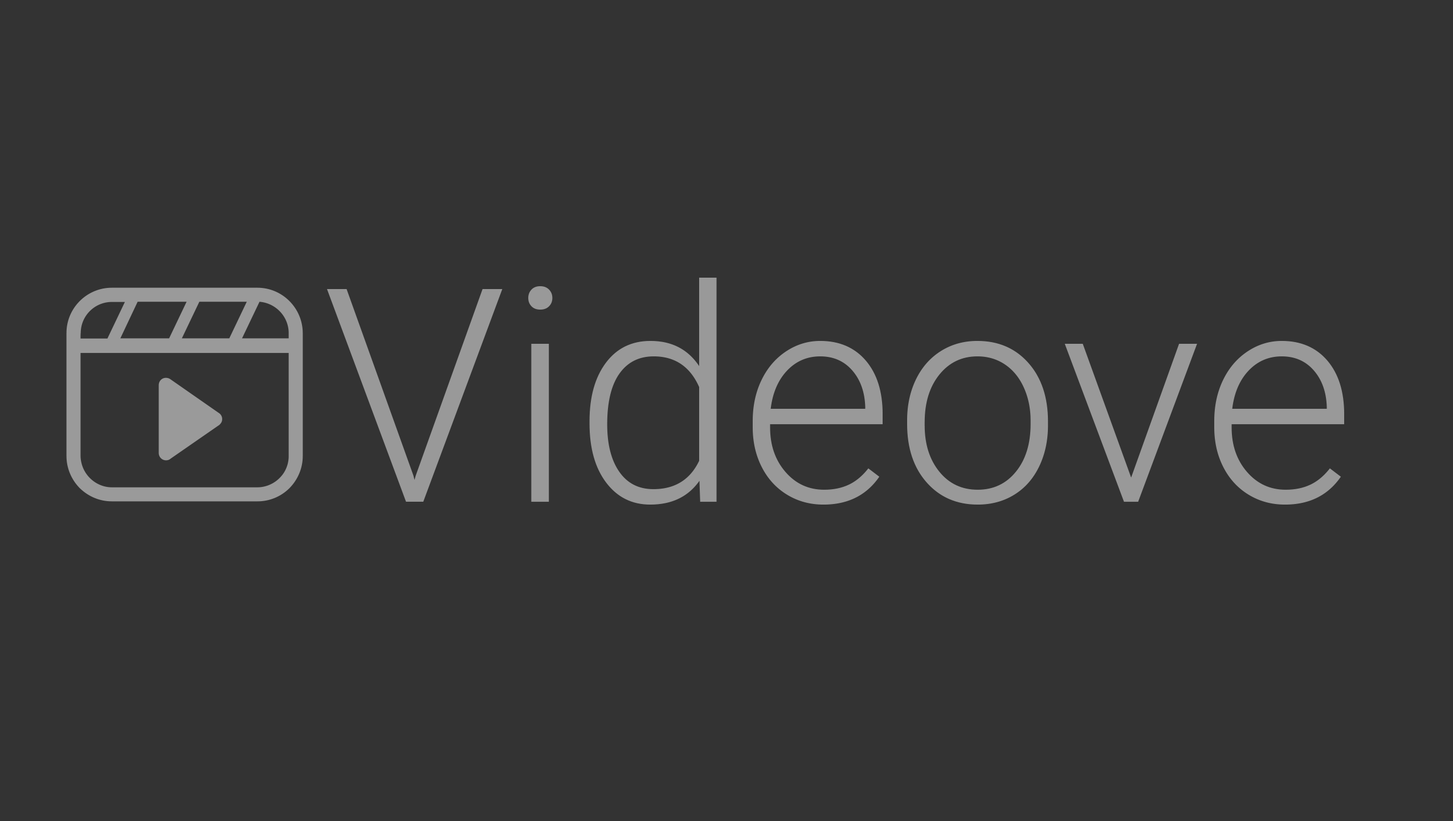
<style>
.page{position:relative;width:1453px;height:821px;background:#333333}
.page>*{position:absolute;margin:0}
.t1{font:298.8px "Roboto-Light";color:#999999}
</style>
<div class="page">
<p class="t1" style="left:327px;top:278px;width:1017px;height:226px">Videove</p>
</div>
